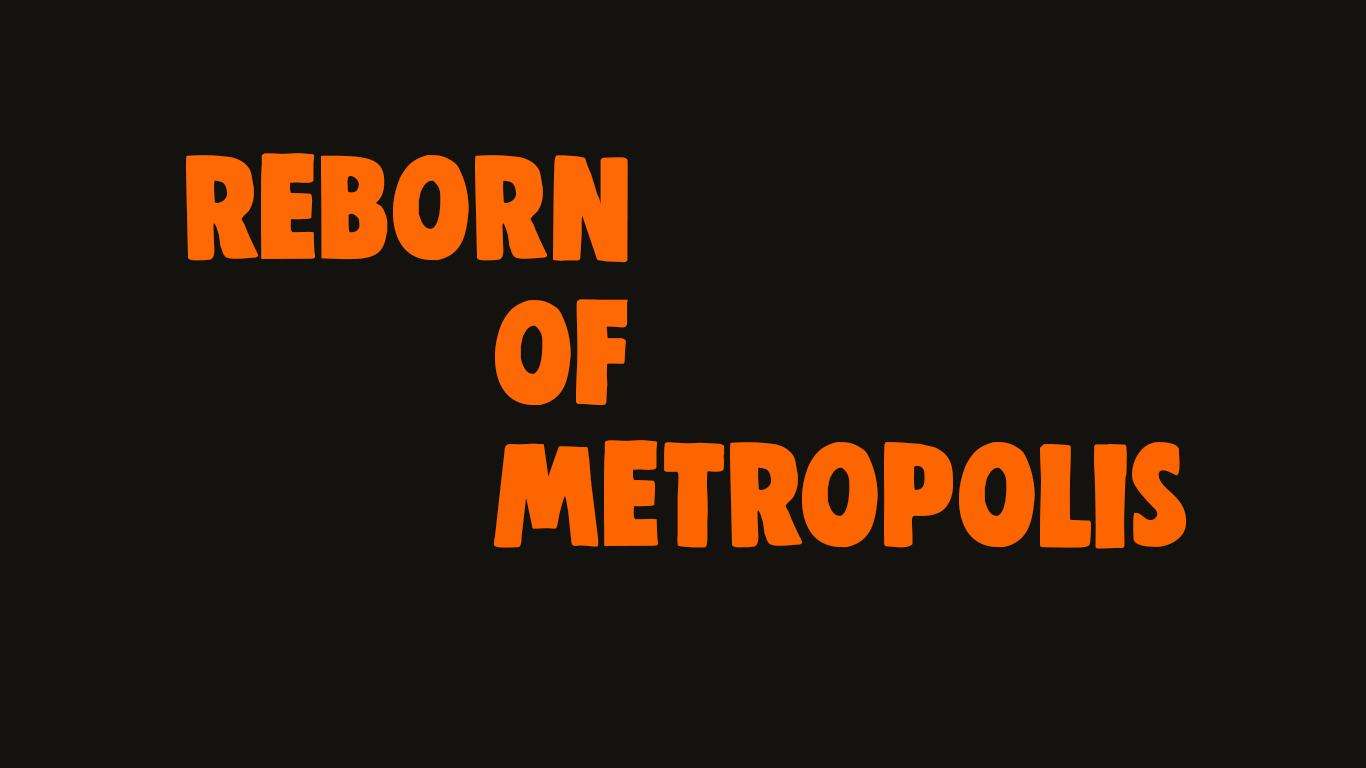
<style>
.page{position:relative;width:1366px;height:768px;background:#13120e}
.page>*{position:absolute;margin:0}
.t1{font:150px "DKWoolwich-Regular";color:#fe6906}
.t2{font:150px "DKWoolwich-Regular";color:#ff6905}
.t3{font:150px "DKWoolwich-Regular";color:#fd6500}
</style>
<div class="page">
<p class="t1" style="left:186px;top:153px;width:442px;height:110px">reborn</p>
<p class="t2" style="left:495px;top:299px;width:133px;height:106px">of</p>
<p class="t3" style="left:494px;top:440px;width:692px;height:109px">Metropolis</p>
</div>
